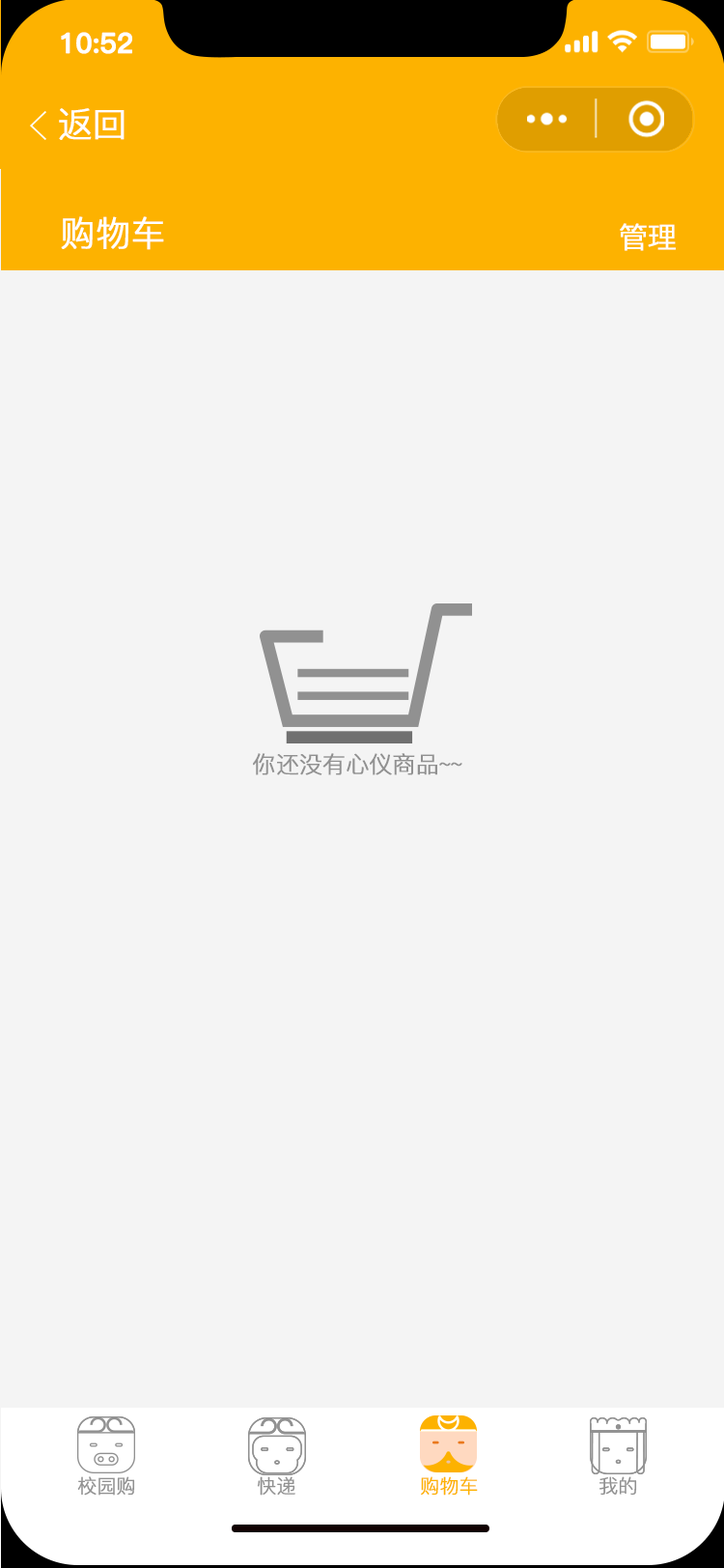
<style>
.page{position:relative;width:724px;height:1568px;background:#f4f4f4}
.page>*{position:absolute;margin:0}
.t1{font:27.5px "PingFang-SC-Bold";letter-spacing:-0.02em;color:#ffffff;font-weight:bold}
.t2{font:34.8px "PingFang-SC-Regular";letter-spacing:-0.02em;color:#ffffff;font-weight:bold}
.t3{font:29px "PingFang-SC-Regular";letter-spacing:-0.02em;color:#ffffff;font-weight:bold}
.t4{font:23.2px "PingFang-SC-Regular";letter-spacing:-0.02em;color:#919191;font-weight:bold}
.t5{font:19.3px "PingFang-SC-Regular";letter-spacing:-0.02em;color:#919191;font-weight:bold}
.t6{font:19.3px "PingFang-SC-Regular";letter-spacing:-0.02em;color:#fdb200;font-weight:bold}
</style>
<div class="page">
<p class="t1" style="left:61px;top:32px;width:71px;height:22px">10:52</p>
<p class="t2" style="left:59px;top:108px;width:66px;height:32px">返回</p>
<p class="t2" style="left:61px;top:216px;width:103px;height:34px">购物车</p>
<p class="t3" style="left:620px;top:223px;width:56px;height:28px">管理</p>
<p class="t4" style="left:253px;top:753px;width:209px;height:22px">你还没有心仪商品~~</p>
<p class="t5" style="left:77px;top:1476px;width:58px;height:20px">校园购</p>
<p class="t5" style="left:257px;top:1476px;width:38px;height:20px">快递</p>
<p class="t6" style="left:421px;top:1476px;width:57px;height:20px">购物车</p>
<p class="t5" style="left:600px;top:1476px;width:37px;height:20px">我的</p>
</div>
